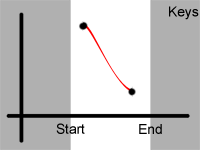
<style>
.page{position:relative;width:200px;height:150px;background:#b0b0b0}
.page>*{position:absolute;margin:0}
.t1{font:13.7px "ArialMT";color:#000000}
</style>
<div class="page">
<p class="t1" style="left:169px;top:6px;width:30px;height:14px">Keys</p>
<p class="t1" style="left:56px;top:123px;width:29px;height:11px">Start</p>
<p class="t1" style="left:139px;top:124px;width:23px;height:10px">End</p>
</div>
